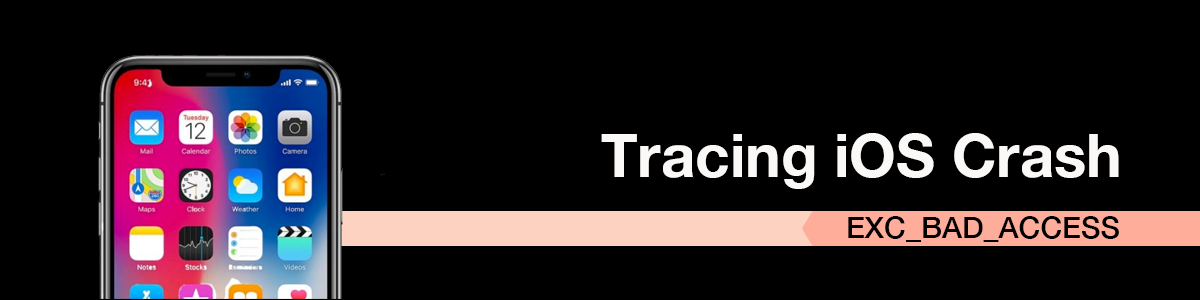
<style>
.page{position:relative;width:1200px;height:300px;background:#000000}
.page>*{position:absolute;margin:0}
.t1{font:60px "HelveticaNeue-Bold";color:#fbf8f8}
.t2{font:30px "HelveticaNeue-Medium";color:#000000}
</style>
<div class="page">
<p class="t1" style="left:601px;top:133px;width:518px;height:56px">Tracing iOS Crash</p>
<p class="t2" style="left:848px;top:216px;width:271px;height:26px">EXC_BAD_ACCESS</p>
</div>
